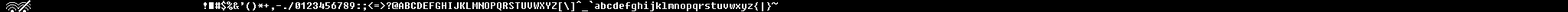
<style>
.page{position:relative;width:1568px;height:12px;background:#000000}
.page>*{position:absolute;margin:0}
.t1{font:12.2px "Fixedsys";color:#ffffff}
</style>
<div class="page">
<p class="t1" style="left:204px;top:1px;width:574px;height:10px">!”#$%&amp;’()*+,-./0123456789:;&lt;=&gt;?@ABCDEFGHIJKLMNOPQRSTUVWXYZ[\]^_`abcdefghijklmnopqrstuvwxyz{|}~</p>
</div>
